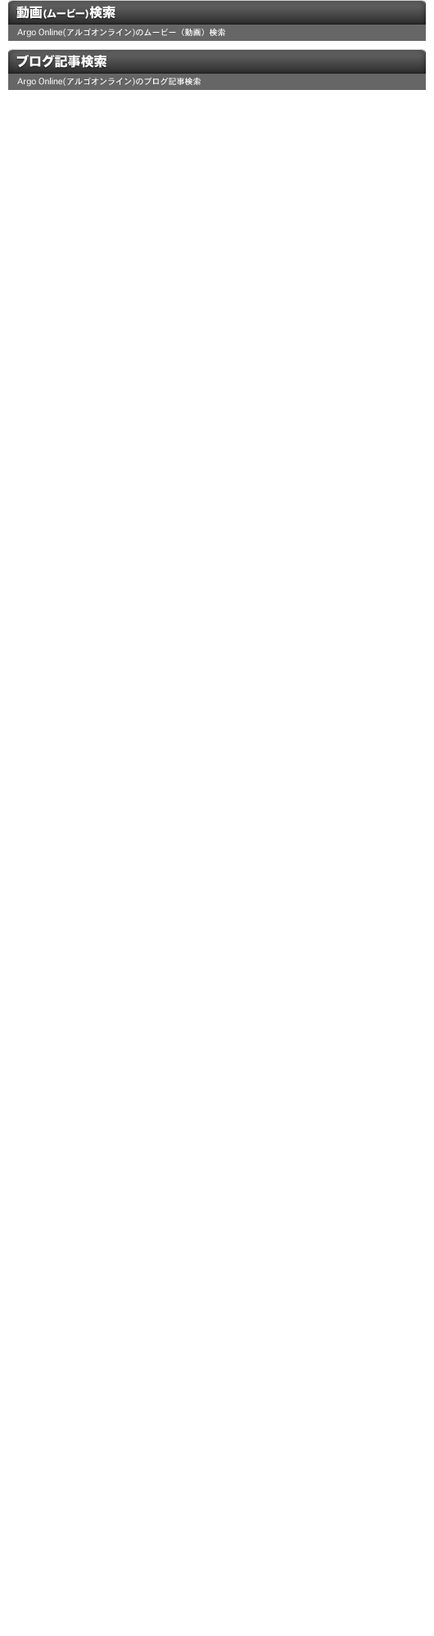
<style>
.page{position:relative;width:434px;height:1636px;background:#ffffff}
.page>*{position:absolute;margin:0}
.t1{font:9.8px "HiraKakuStd-W8";color:#ffffff}
.t2{font:13.1px "HiraKakuStd-W8";color:#ffffff}
.t3{font:8.2px "Osaka";color:#ffffff}
</style>
<div class="page">
<p class="t1" style="left:16px;top:6px;width:99px;height:14px"><span class="t2">動画</span>(ムービー)<span class="t2">検索</span></p>
<p class="t3" style="left:17px;top:28px;width:208px;height:10px">Argo Online(アルゴオンライン)のムービー（動画）検索</p>
<p class="t2" style="left:16px;top:55px;width:91px;height:13px">ブログ記事検索</p>
<p class="t3" style="left:17px;top:77px;width:183px;height:10px">Argo Online(アルゴオンライン)のブログ記事検索</p>
</div>
